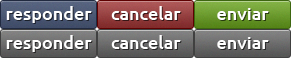
<style>
.page{position:relative;width:291px;height:58px}
.page>*{position:absolute;margin:0}
.t1{font:18px "Ubuntu-Medium";color:#ffffff}
</style>
<div class="page">
<p class="t1" style="left:6px;top:6px;width:86px;height:17px">responder</p>
<p class="t1" style="left:111px;top:6px;width:70px;height:14px">cancelar</p>
<p class="t1" style="left:217px;top:8px;width:52px;height:12px">enviar</p>
<p class="t1" style="left:6px;top:35px;width:86px;height:17px">responder</p>
<p class="t1" style="left:111px;top:35px;width:70px;height:14px">cancelar</p>
<p class="t1" style="left:217px;top:37px;width:52px;height:12px">enviar</p>
</div>
